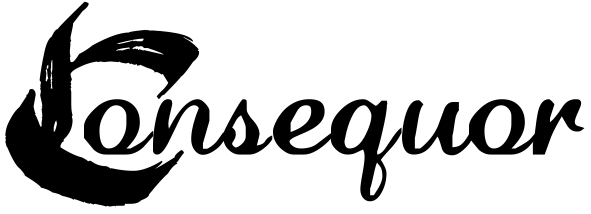
<style>
.page{position:relative;width:591px;height:214px;background:#ffffff}
.page>*{position:absolute;margin:0}
.t1{font:162px "BlackFlag";color:#000000}
.t2{font:118px "LaurenScript";color:#000000}
</style>
<div class="page">
<p class="t1" style="left:5px;top:1px;width:195px;height:206px">C</p>
<p class="t2" style="left:84px;top:99px;width:501px;height:103px">onsequor</p>
</div>
